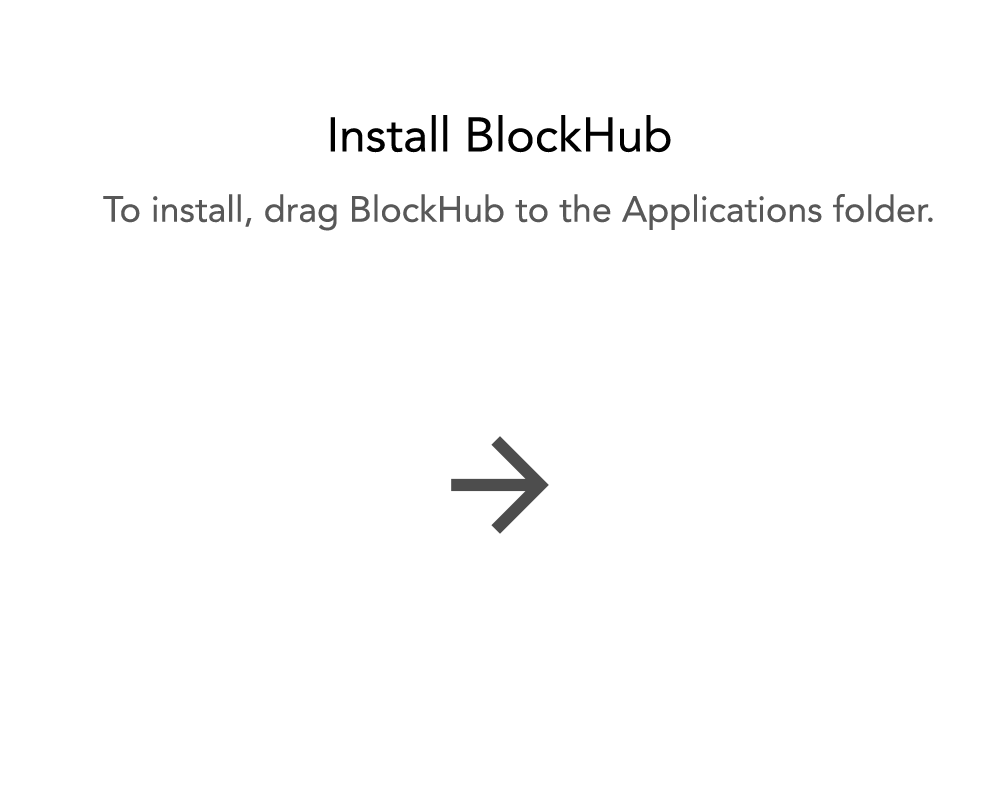
<style>
.page{position:relative;width:1000px;height:800px;background:#ffffff}
.page>*{position:absolute;margin:0}
.t1{font:48px "Avenir-Roman";color:#000000}
.t2{font:36px "Avenir-Roman";color:#585858}
</style>
<div class="page">
<p class="t1" style="left:330px;top:115px;width:341px;height:38px">Install BlockHub</p>
<p class="t2" style="left:103px;top:194px;width:830px;height:37px">To install, drag BlockHub to the Applications folder.</p>
</div>
